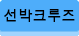
<style>
.page{position:relative;width:79px;height:36px;background:#4eadfa}
.page>*{position:absolute;margin:0}
.t1{font:14px "H2gtrM";color:#000000;font-weight:bold}
</style>
<div class="page">
<p class="t1" style="left:4px;top:9px;width:71px;height:13px">선박크루즈</p>
</div>
